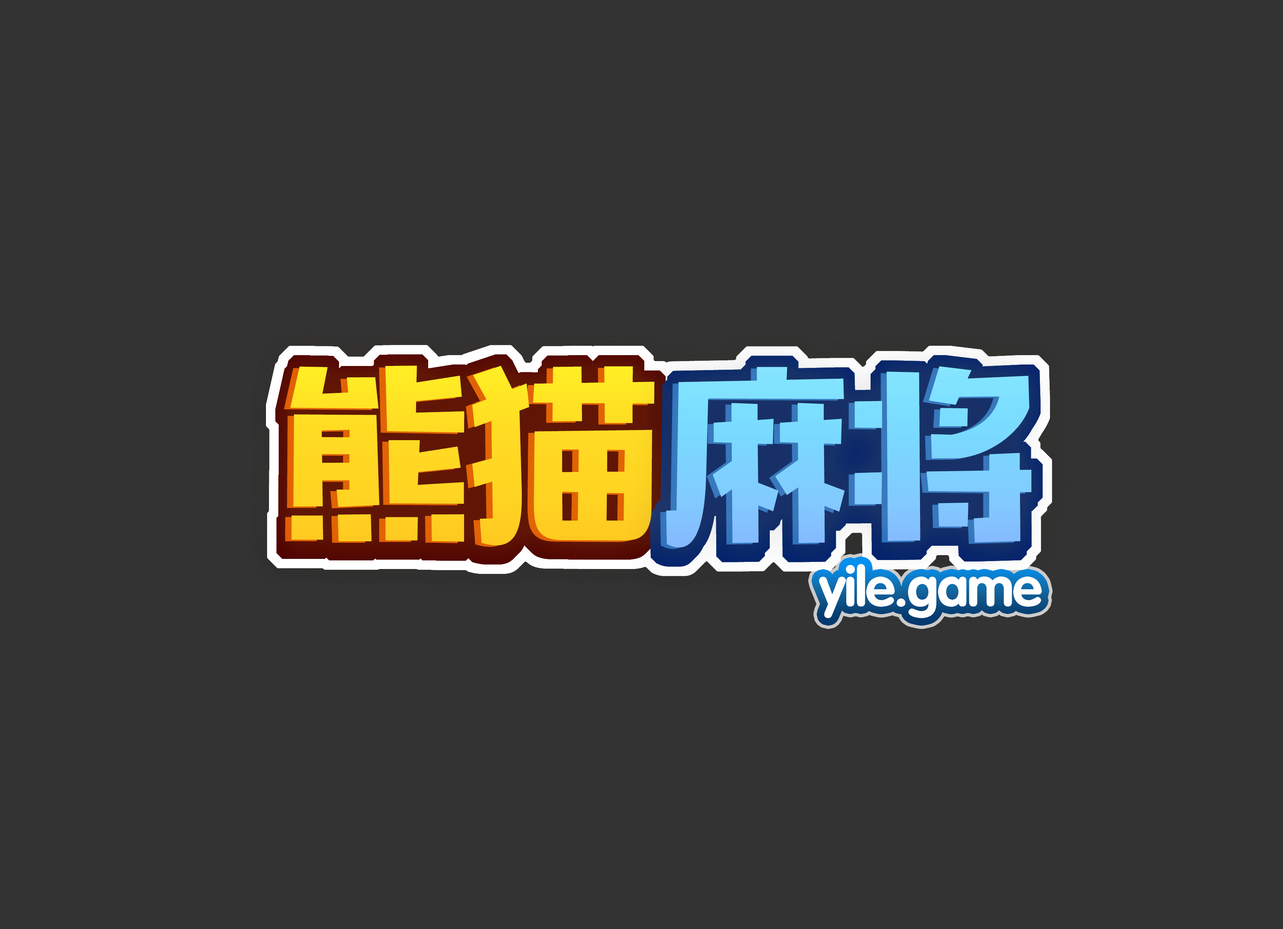
<style>
.page{position:relative;width:1283px;height:929px;background:#333333}
.page>*{position:absolute;margin:0}
.t1{font:193.6px "MFTongXin_Noncommercial-Regular";letter-spacing:-0.025em;color:#ffd823}
.t2{font:193.6px "MFTongXin_Noncommercial-Regular";letter-spacing:-0.025em;color:#ffd722}
.t3{font:193.6px "MFTongXin_Noncommercial-Regular";letter-spacing:-0.025em;color:#7ed0ff}
.t4{font:193.6px "MFTongXin_Noncommercial-Regular";letter-spacing:-0.025em;color:#7fd5ff}
.t5{font:55.1px "FZY4JW--GB1-0";letter-spacing:-0.025em;color:#ffffff}
</style>
<div class="page">
<p class="t1" style="left:290px;top:366px;width:365px;height:180px">熊猫</p>
<p class="t2" style="left:284px;top:367px;width:364px;height:180px">熊猫</p>
<p class="t3" style="left:660px;top:368px;width:366px;height:181px">麻将</p>
<p class="t4" style="left:666px;top:366px;width:366px;height:182px">麻将</p>
<p class="t5" style="left:819px;top:564px;width:223px;height:54px">yile.game</p>
</div>
